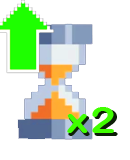
<style>
.page{position:relative;width:130px;height:160px;background:#ffffff}
.page>*{position:absolute;margin:0}
.t1{font:36px "ArialRoundedMTBold";letter-spacing:0.03em;color:#40ff00;scale:1.2 1}
.t2{font:38px "ArialRoundedMTBold";letter-spacing:0.03em;scale:1.2 1}
</style>
<div class="page">
<p class="t1" style="left:67px;top:107px;width:47px;height:26px">x2</p>
<p class="t2" style="left:68px;top:109px;width:50px;height:27px">x2</p>
</div>
